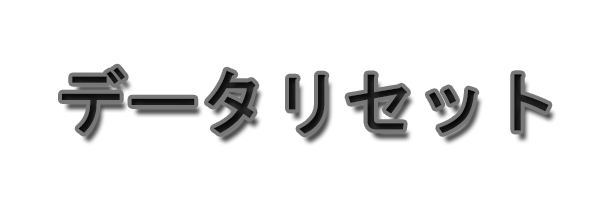
<style>
.page{position:relative;width:600px;height:200px;background:#ffffff}
.page>*{position:absolute;margin:0}
.t1{font:72px "MS-Gothic";color:#141414}
</style>
<div class="page">
<p class="t1" style="left:62px;top:67px;width:487px;height:67px">データリセット</p>
</div>
